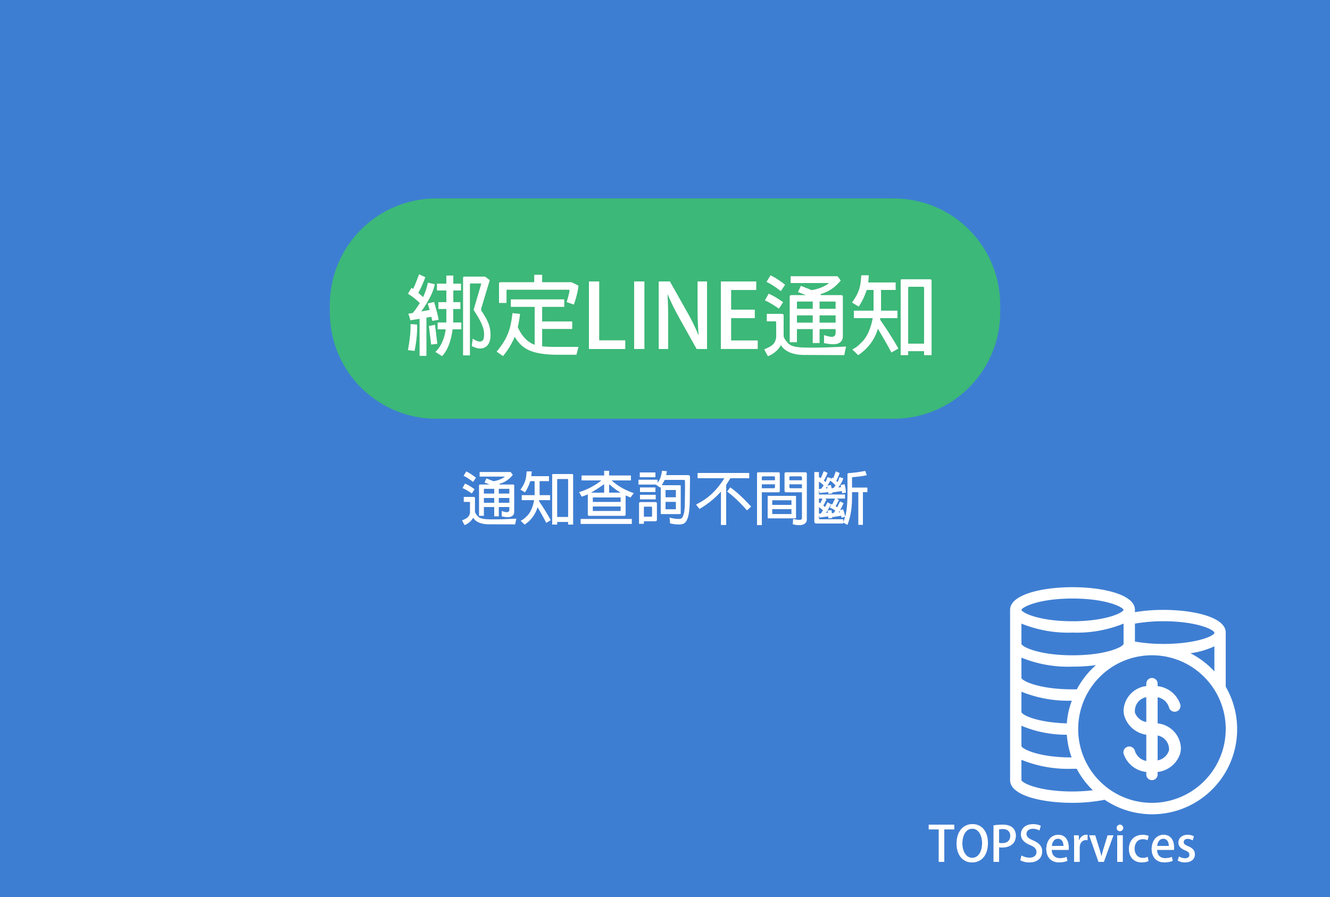
<style>
.page{position:relative;width:1330px;height:897px;background:#3e7ed2}
.page>*{position:absolute;margin:0}
.t1{font:88.3px "AdobeFanHeitiStd-Bold";color:#ffffff}
.t2{font:58.5px "AdobeFanHeitiStd-Bold";color:#ffffff}
.t3{font:48.4px "AdobeFanHeitiStd-Bold";color:#ffffff}
</style>
<div class="page">
<p class="t1" style="left:407px;top:274px;width:525px;height:82px">綁定LINE通知</p>
<p class="t2" style="left:462px;top:470px;width:406px;height:55px">通知查詢不間斷</p>
<p class="t3" style="left:928px;top:824px;width:267px;height:38px">TOPServices</p>
</div>
